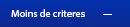
<style>
.page{position:relative;width:130px;height:27px}
.page>*{position:absolute;margin:0}
.t1{font:10.4px "MyriadPro-Regular";color:#ffffff}
</style>
<div class="page">
<p class="t1" style="left:11px;top:9px;width:101px;height:8px">Moins de criteres        ---</p>
</div>
